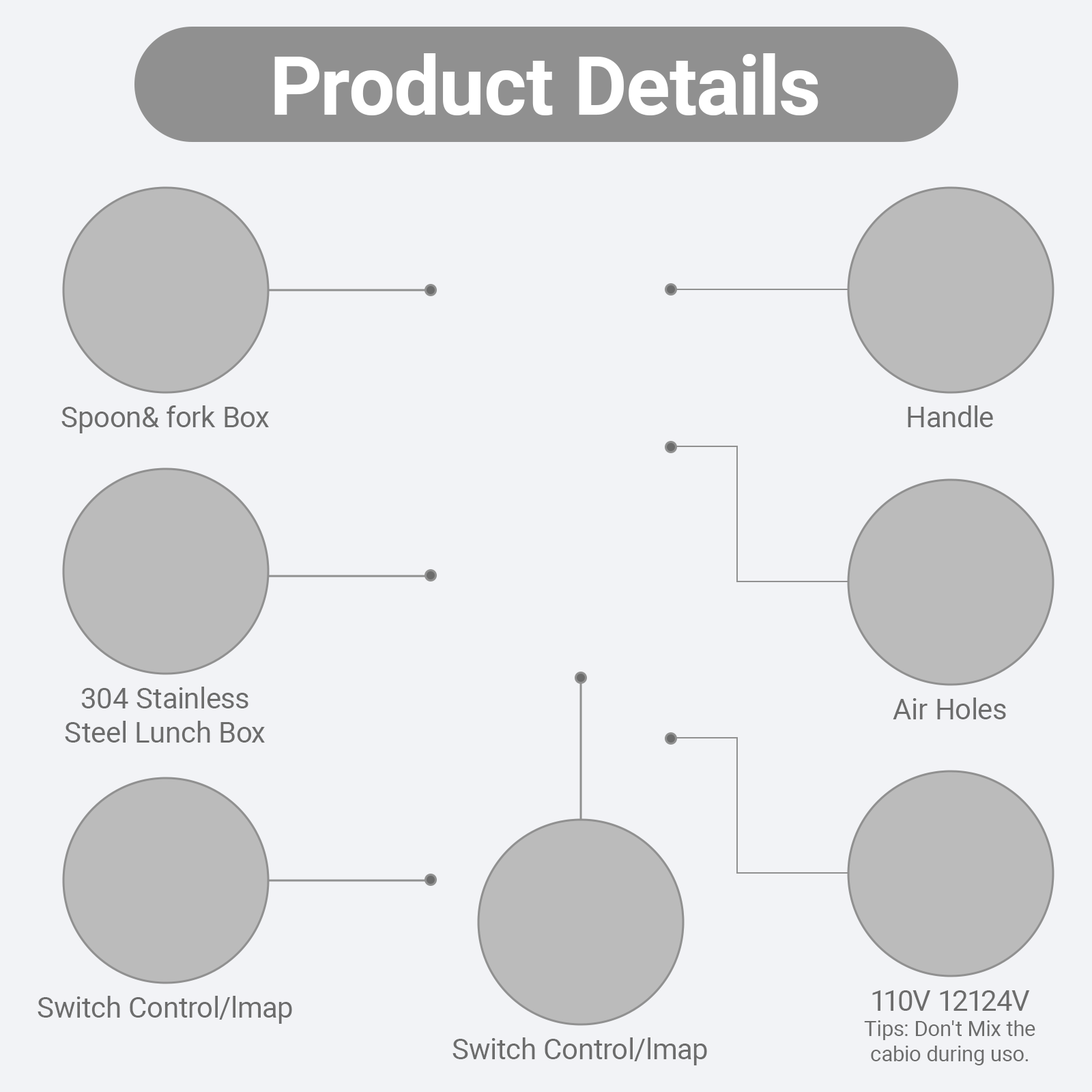
<style>
.page{position:relative;width:1092px;height:1092px;background:#f2f3f6}
.page>*{position:absolute;margin:0}
.t1{font:81.9px "Roboto-Bold";color:#ffffff}
.t2{font:28.7px "Roboto-Regular";color:#6c6c6c}
.t3{font:21.2px "Roboto-Regular";color:#6c6c6c}
</style>
<div class="page">
<p class="t1" style="left:274px;top:53px;width:544px;height:62px">Product Details</p>
<p class="t2" style="left:61px;top:405px;width:208px;height:28px">Spoon&amp; fork Box</p>
<p class="t2" style="left:908px;top:405px;width:85px;height:22px">Handle</p>
<p class="t2" style="left:65px;top:687px;width:200px;height:56px;text-align:center">304 Stainless<br>Steel Lunch Box</p>
<p class="t2" style="left:893px;top:698px;width:113px;height:21px">Air Holes</p>
<p class="t2" style="left:38px;top:996px;width:254px;height:28px">Switch Control/lmap</p>
<p class="t3" style="left:864px;top:990px;width:171px;height:75px;text-align:center"><span class="t2">110V 12124V<br></span>Tips: Don't Mix the<br>cabio during uso.</p>
<p class="t2" style="left:452px;top:1037px;width:255px;height:28px">Switch Control/lmap</p>
</div>
